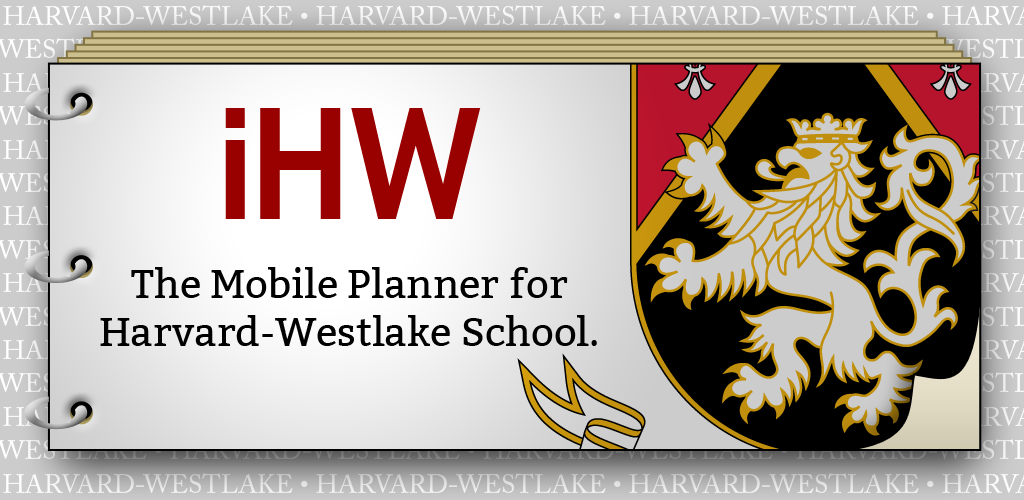
<style>
.page{position:relative;width:1024px;height:500px}
.page>*{position:absolute;margin:0}
.t1{font:157.8px "CabinCondensed-Bold";color:#990000}
.t2{font:39.9px "Bitter-Regular";color:#000000}
</style>
<div class="page">
<p class="t1" style="left:225px;top:108px;width:256px;height:111px">iHW</p>
<p class="t2" style="left:100px;top:267px;width:497px;height:79px;text-align:center">The Mobile Planner for<br>Harvard-Westlake School.</p>
</div>
